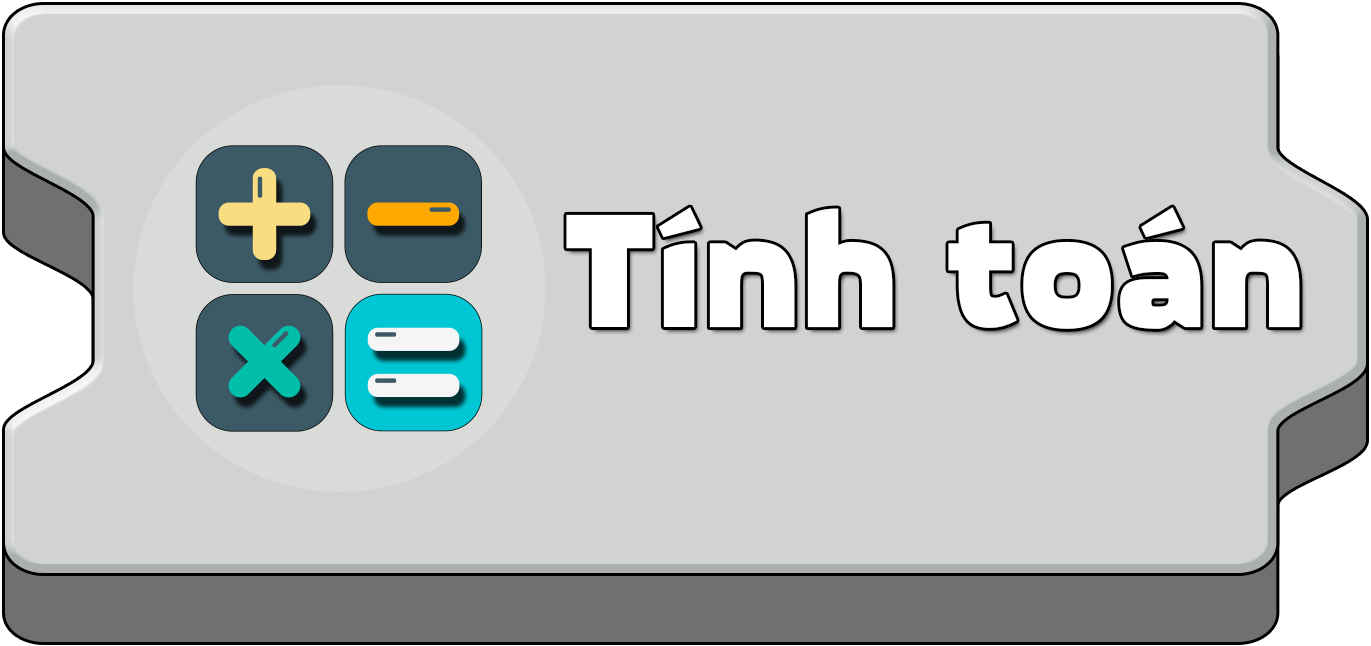
<style>
.page{position:relative;width:1371px;height:646px;background:#d1d3d3}
.page>*{position:absolute;margin:0}
.t1{font:157.8px "MovaviGrotesqueBlack";color:#ffffff}
</style>
<div class="page">
<p class="t1" style="left:566px;top:207px;width:734px;height:122px">Tính toán</p>
</div>
